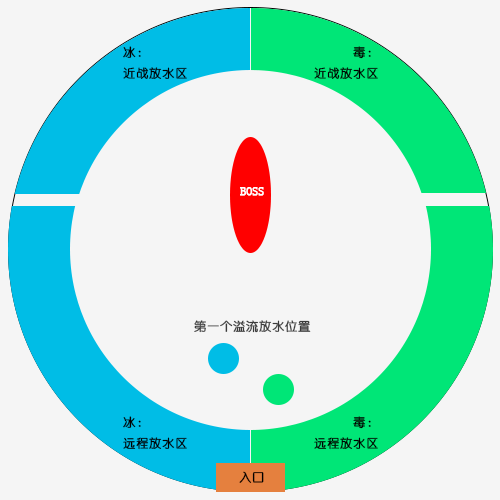
<style>
.page{position:relative;width:500px;height:500px;background:#f5f5f5}
.page>*{position:absolute;margin:0}
.t1{font:12px "YouYuan";color:#000000;font-weight:bold}
.t2{font:12px "YouYuan";color:#ffffff;font-weight:bold}
.t3{font:12px "YouYuan";color:#3b3b3b;font-weight:bold}
</style>
<div class="page">
<p class="t1" style="left:123px;top:46px;width:64px;height:33px">冰：<br>近战放水区</p>
<p class="t1" style="left:314px;top:46px;width:64px;height:33px;text-align:right">毒：<br>近战放水区</p>
<p class="t2" style="left:240px;top:187px;width:24px;height:9px">BOSS</p>
<p class="t3" style="left:194px;top:320px;width:117px;height:13px">第一个溢流放水位置</p>
<p class="t1" style="left:123px;top:416px;width:64px;height:34px">冰：<br>远程放水区</p>
<p class="t1" style="left:314px;top:416px;width:64px;height:34px;text-align:right">毒：<br>远程放水区</p>
<p class="t1" style="left:239px;top:471px;width:25px;height:12px">入口</p>
</div>
